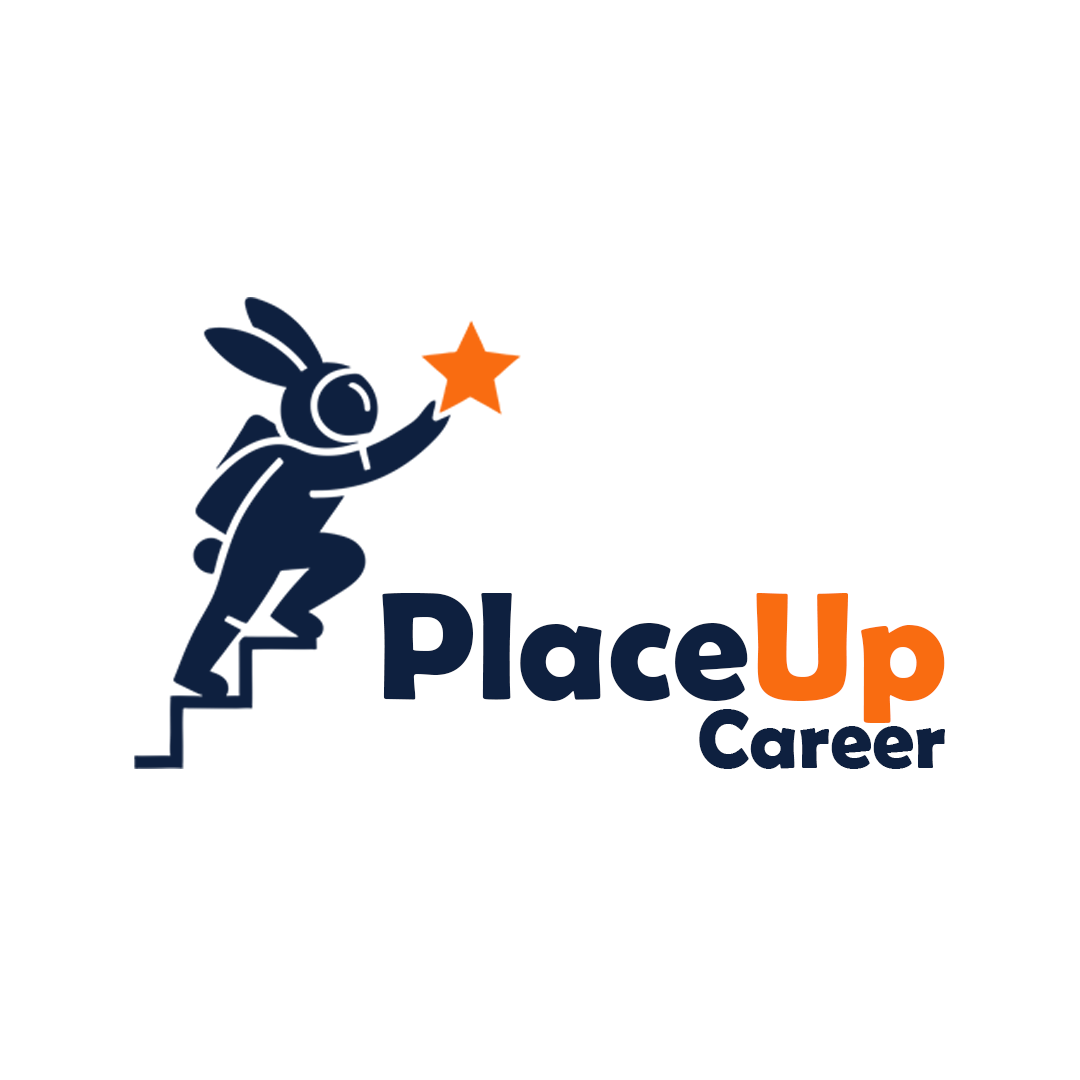
<style>
.page{position:relative;width:1080px;height:1080px;background:#ffffff}
.page>*{position:absolute;margin:0}
.t1{font:154.4px "BerlinSansFBDemi-Bold";color:#0e203f}
.t2{font:154.4px "BerlinSansFBDemi-Bold";color:#f96c11}
.t3{font:83.8px "BerlinSansFBDemi-Bold";color:#0e203f}
</style>
<div class="page">
<p class="t1" style="left:382px;top:593px;width:563px;height:130px">Place<span class="t2">Up</span></p>
<p class="t3" style="left:699px;top:709px;width:246px;height:60px">Career</p>
</div>
